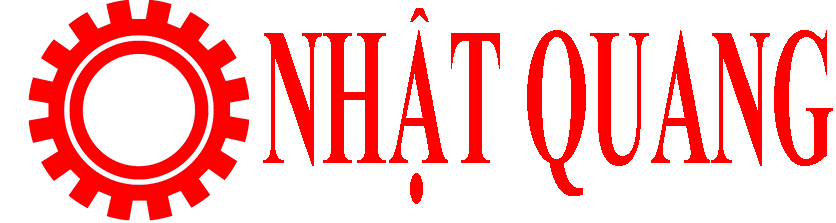
<style>
.page{position:relative;width:836px;height:223px;background:#ffffff}
.page>*{position:absolute;margin:0}
.t1{font:195.9px "TimesNewRomanPS-BoldMT";color:#fe0000;scale:0.43 1}
</style>
<div class="page">
<p class="t1" style="left:263px;top:8px;width:570px;height:196px">NHẬT QUANG</p>
</div>
